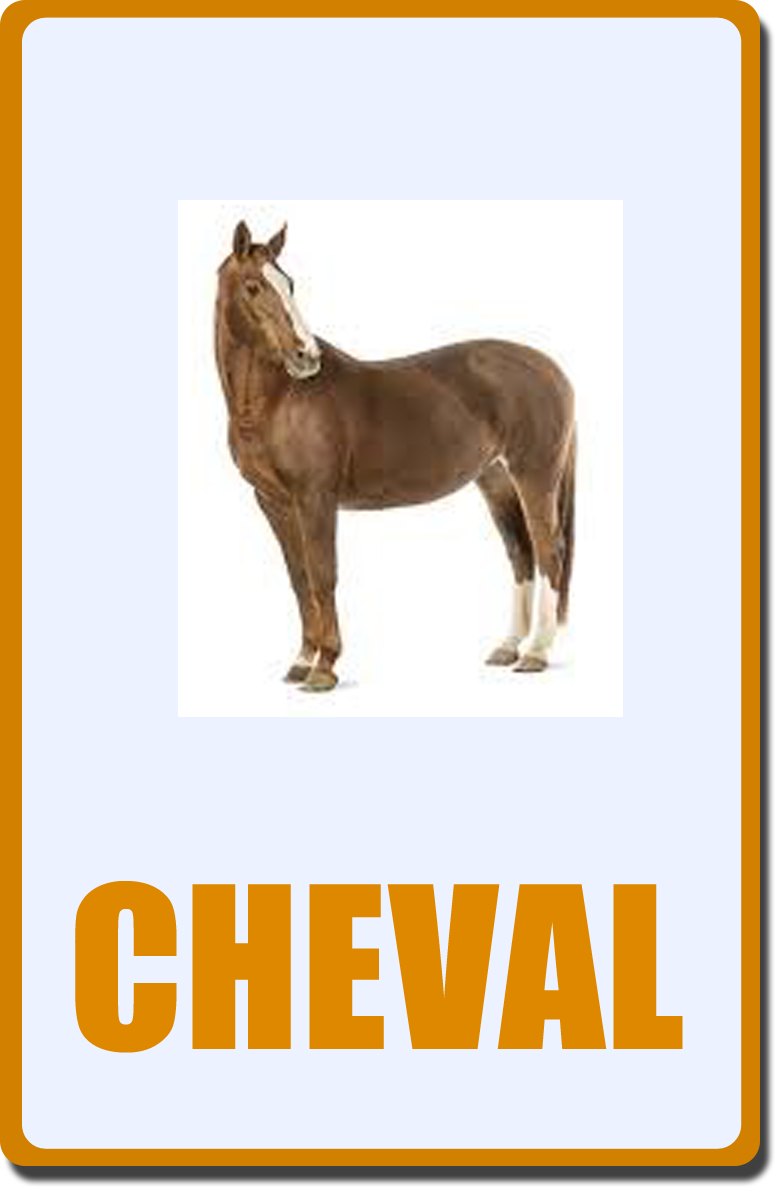
<style>
.page{position:relative;width:775px;height:1187px;background:#ecf2ff}
.page>*{position:absolute;margin:0}
.t1{font:208.3px "Impact";letter-spacing:0.005em;color:#de8800}
</style>
<div class="page">
<p class="t1" style="left:75px;top:881px;width:608px;height:172px">CHEVAL</p>
</div>
